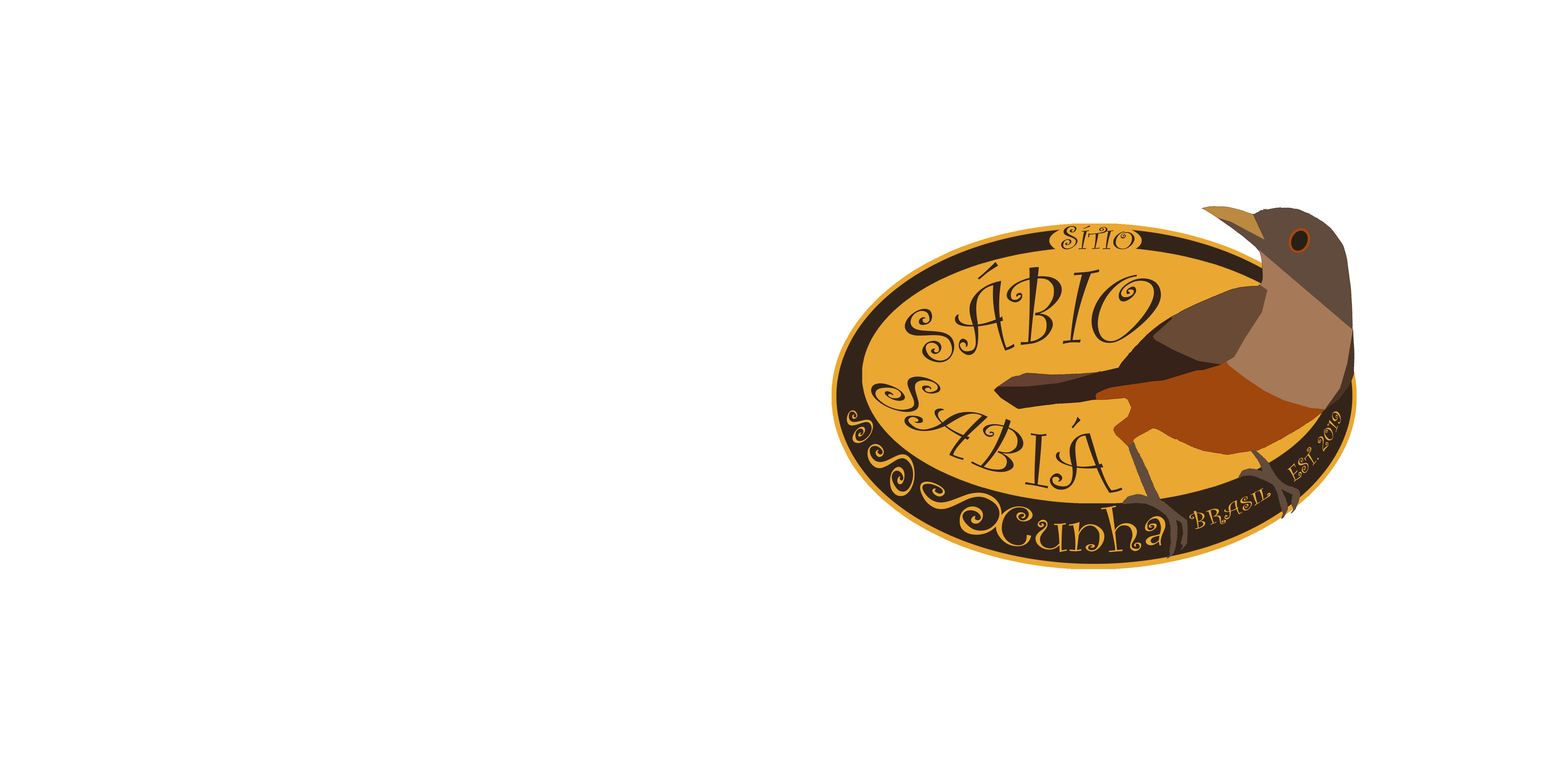
<style>
.page{position:relative;width:1544px;height:772px;background:#ffffff}
.page>*{position:absolute;margin:0}
.t1{font:27.8px "CurlzMT";color:#33241a;text-transform:uppercase;font-style:italic;scale:1.2 1}
.t2{font:34px "CurlzMT";color:#33241a;text-transform:uppercase;font-style:italic;scale:1.2 1}
.t3{font:65.6px "CurlzMT";color:#33241a;text-transform:uppercase;font-style:italic;scale:1.39 1}
.t4{font:61.6px "CurlzMT";color:#33241a;text-transform:uppercase;font-style:italic;scale:1.3 1}
.t5{font:37.1px "CurlzMT";color:#eaa731;text-transform:uppercase;font-style:italic}
.t6{font:78.8px "CurlzMT";color:#eaa731;text-transform:uppercase;font-style:italic;scale:0.67 1}
.t7{font:74.1px "CurlzMT";color:#eaa731;text-transform:uppercase;font-style:italic;scale:0.67 1}
.t8{font:24.7px "CurlzMT";color:#eaa731;text-transform:uppercase;font-style:italic;scale:0.9 1}
.t9{font:58.7px "CurlzMT";color:#eaa731}
</style>
<div class="page">
<p class="t1" style="left:1061px;top:225px;width:74px;height:25px"><span class="t2">S</span>ÍTIO</p>
<p class="t3" style="left:905px;top:262px;width:256px;height:101px;rotate:-8deg">SÁBIO</p>
<p class="t4" style="left:871px;top:377px;width:252px;height:116px;rotate:22deg">SABIÁ</p>
<p class="t5" style="left:847px;top:410px;width:26px;height:33px;rotate:-35deg">s</p>
<p class="t6" style="left:868px;top:444px;width:47px;height:52px;rotate:-56deg">s</p>
<p class="t7" style="left:920px;top:482px;width:82px;height:53px;rotate:-41deg">s</p>
<p class="t8" style="left:1189px;top:488px;width:82px;height:41px;rotate:-33deg">brasil</p>
<p class="t9" style="left:996px;top:506px;width:170px;height:46px;rotate:1deg">Cunha</p>
</div>
